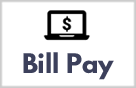
<style>
.page{position:relative;width:136px;height:88px;background:#ffffff}
.page>*{position:absolute;margin:0}
.t1{font:24px "LeagueSpartan-Bold";color:#3c405b}
</style>
<div class="page">
<p class="t1" style="left:23px;top:52px;width:91px;height:28px">Bill Pay</p>
</div>
